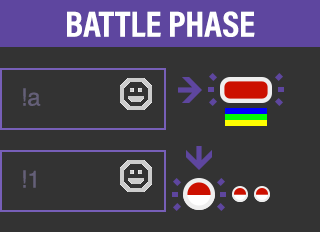
<style>
.page{position:relative;width:320px;height:232px;background:#333333}
.page>*{position:absolute;margin:0}
.t1{font:36.3px "AcuminProCond-Bold";color:#ffffff;text-transform:uppercase}
.t2{font:24px "Helvetica";color:#645f78}
</style>
<div class="page">
<p class="t1" style="left:67px;top:11px;width:188px;height:26px">Battle Phase</p>
<p class="t2" style="left:23px;top:88px;width:18px;height:18px">!a</p>
<p class="t2" style="left:23px;top:170px;width:13px;height:18px">!1</p>
</div>
